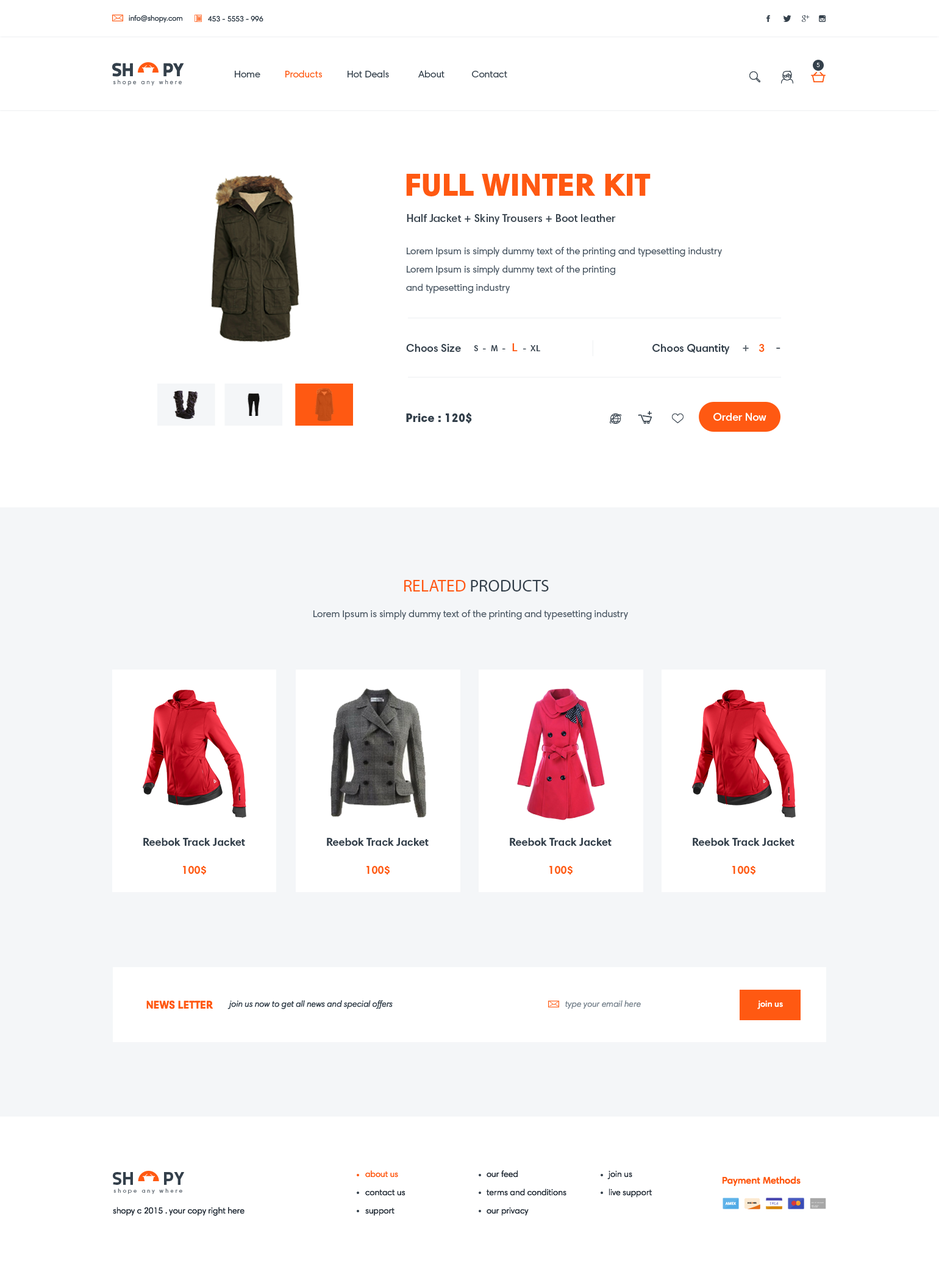
<style>
.page{position:relative;width:939px;height:1269px;background:#ffffff}
.page>*{position:absolute;margin:0}
.t1{font:7.3px "HarmoniaSansProCyr-Regular";color:#34404b}
.t2{font:18.3px "TitilliumText22L-XBold";color:#34404b}
.t3{font:6.1px "HarmoniaSansProCyr-Light";color:#ffffff}
.t4{font:9.8px "HarmoniaSansProCyr-Regular";color:#34404b}
.t5{font:9.8px "HarmoniaSansProCyr-Regular";color:#ff5912}
.t6{font:10.4px "HarmoniaSansProCyr-Regular";letter-spacing:0.28em;color:#6b737b}
.t7{font:31.8px "HarmoniaSansProCyr-Black";color:#ff5912}
.t8{font:11px "HarmoniaSansProCyr-SemiBd";color:#3c4751}
.t9{font:9.8px/18.3px "HarmoniaSansProCyr-Regular";color:#495662}
.t10{font:11px "HarmoniaSansProCyr-SemiBd";color:#34404b}
.t11{font:8.6px "HarmoniaSansProCyr-SemiBd";color:#34404b}
.t12{font:11px "HarmoniaSansProCyr-SemiBd";color:#ff5912}
.t13{font:11.1px "HarmoniaSansProCyr-SemiBd";color:#59626b}
.t14{font:11px "HarmoniaSansProCyr-SemiBd";color:#59626b}
.t15{font:11.1px "HarmoniaSansProCyr-SemiBd";color:#ff5912}
.t16{font:12.2px "HarmoniaSansProCyr-Black";color:#34404b}
.t17{font:11.1px "HarmoniaSansProCyr-SemiBd";color:#ffffff}
.t18{font:17.1px "MyriadPro-Regular";color:#34404b}
.t19{font:17.1px "MyriadPro-Regular";color:#ff5912}
.t20{font:9.8px "HarmoniaSansProCyr-Regular";color:#495662}
.t21{font:11px "HarmoniaSansProCyr-Bold";color:#34404b}
.t22{font:11px "HarmoniaSansProCyr-Bold";color:#ff5912}
.t23{font:8.5px "HarmoniaSansProCyr-Italic";color:#34404b}
.t24{font:8.5px "HarmoniaSansProCyr-Italic";color:#7c8791}
.t25{font:8.5px "HarmoniaSansProCyr-SemiBd";color:#ffffff}
.t26{font:8.5px/18.3px "HarmoniaSansProCyr-Regular";color:#28313b}
.t27{font:8.5px/18.3px "HarmoniaSansProCyr-Regular";color:#ff5912}
.t28{font:9.8px "HarmoniaSansProCyr-SemiBd";color:#ff5912}
.t29{font:8.5px "HarmoniaSansProCyr-Regular";color:#28313b}
</style>
<div class="page">
<p class="t1" style="left:129px;top:15px;width:54px;height:8px">info@shopy.com</p>
<p class="t1" style="left:208px;top:16px;width:56px;height:6px">996 - 5553 - 453</p>
<p class="t2" style="left:112px;top:63px;width:72px;height:14px">SH     PY</p>
<p class="t3" style="left:817px;top:63px;width:3px;height:4px">5</p>
<p class="t4" style="left:235px;top:70px;width:273px;height:7px">Home          <span class="t5">Products          </span>Hot Deals            About           Contact</p>
<p class="t6" style="left:113px;top:79px;width:69px;height:7px">shope any where</p>
<p class="t7" style="left:406px;top:174px;width:245px;height:22px">FULL WINTER KIT</p>
<p class="t8" style="left:407px;top:214px;width:209px;height:10px">Half Jacket + Skiny Trousers + Boot leather</p>
<p class="t9" style="left:406px;top:247px;width:316px;height:46px;text-align:right">Lorem Ipsum is simply dummy text of the printing and typesetting industry<br>Lorem Ipsum is simply dummy text of the printing<br> and typesetting industry</p>
<p class="t10" style="left:406px;top:344px;width:55px;height:8px">Choos Size</p>
<p class="t11" style="left:474px;top:343px;width:66px;height:8px">S  -  M  -  <span class="t12">L  </span>-  XL</p>
<p class="t10" style="left:653px;top:344px;width:77px;height:10px">Choos Quantity</p>
<p class="t13" style="left:743px;top:345px;width:6px;height:6px"><span class="t14"> </span>+</p>
<p class="t15" style="left:759px;top:344px;width:6px;height:8px"><span class="t10"> </span>3</p>
<p class="t13" style="left:777px;top:348px;width:4px;height:1px"><span class="t14"> </span>-</p>
<p class="t16" style="left:406px;top:413px;width:66px;height:10px">$120 : Price</p>
<p class="t17" style="left:714px;top:413px;width:53px;height:8px">Order Now</p>
<p class="t18" style="left:404px;top:580px;width:145px;height:12px"><span class="t19">RELATED </span>PRODUCTS</p>
<p class="t20" style="left:314px;top:610px;width:314px;height:10px">Lorem Ipsum is simply dummy text of the printing and typesetting industry</p>
<p class="t21" style="left:143px;top:838px;width:102px;height:8px">Reebok Track Jacket</p>
<p class="t21" style="left:327px;top:838px;width:102px;height:8px">Reebok Track Jacket</p>
<p class="t21" style="left:510px;top:838px;width:102px;height:8px">Reebok Track Jacket</p>
<p class="t21" style="left:693px;top:838px;width:102px;height:8px">Reebok Track Jacket</p>
<p class="t22" style="left:183px;top:866px;width:23px;height:9px">$100</p>
<p class="t22" style="left:367px;top:866px;width:23px;height:9px">$100</p>
<p class="t22" style="left:550px;top:866px;width:23px;height:9px">$100</p>
<p class="t22" style="left:733px;top:866px;width:23px;height:9px">$100</p>
<p class="t22" style="left:146px;top:1000px;width:67px;height:10px">NEWS LETTER</p>
<p class="t23" style="left:228px;top:1000px;width:165px;height:10px">join us now to get all news and special offers</p>
<p class="t24" style="left:565px;top:1000px;width:76px;height:10px">type your email here</p>
<p class="t25" style="left:758px;top:1000px;width:25px;height:10px">join us</p>
<p class="t2" style="left:113px;top:1172px;width:71px;height:13px">SH     PY</p>
<p class="t26" style="left:365px;top:1171px;width:41px;height:45px;text-align:right"><span class="t27">about us<br></span>contact us<br>support</p>
<p class="t26" style="left:487px;top:1171px;width:80px;height:45px;text-align:right">our feed<br>terms and conditions<br>our privacy</p>
<p class="t26" style="left:608px;top:1171px;width:44px;height:27px;text-align:right">join us<br>live support</p>
<p class="t28" style="left:722px;top:1177px;width:79px;height:9px">Payment Methods</p>
<p class="t6" style="left:113px;top:1189px;width:69px;height:5px">shope any where</p>
<p class="t29" style="left:113px;top:1207px;width:132px;height:9px">shopy c 2015 . your copy right here</p>
</div>
